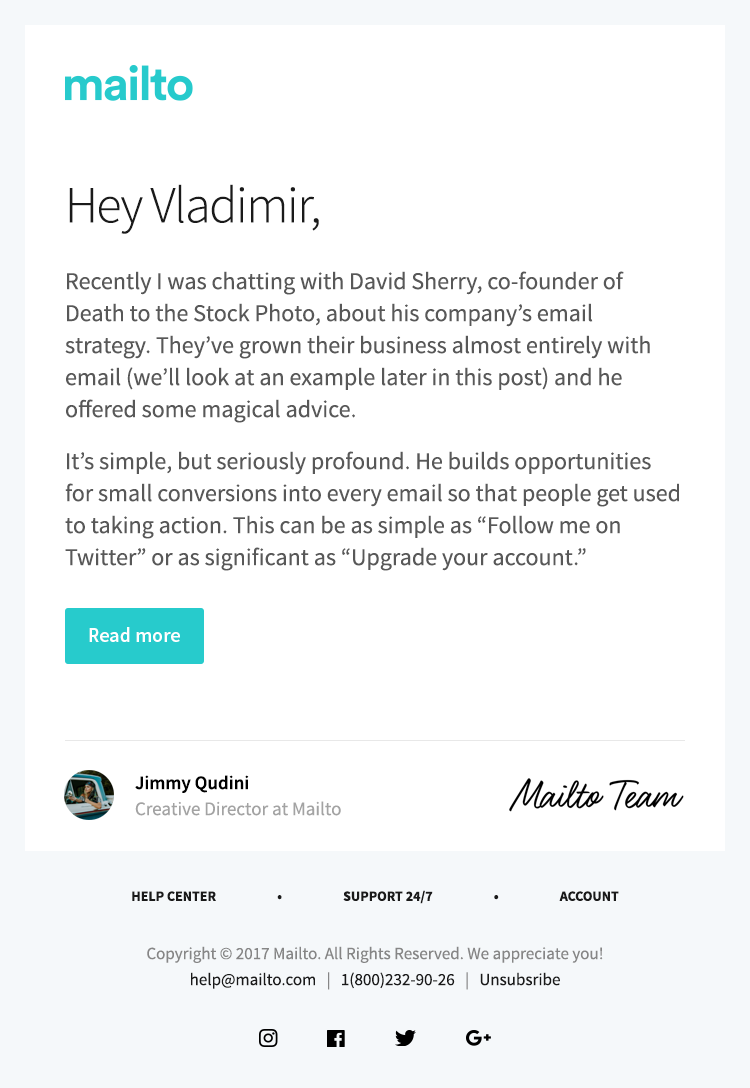
<style>
.page{position:relative;width:750px;height:1088px;background:#ffffff}
.page>*{position:absolute;margin:0}
.t1{font:52px "SourceSansPro-Light";letter-spacing:-0.03em;color:#1a1a1a}
.t2{font:24px/32px "SourceSansPro-Regular";color:#585858}
.t3{font:20px "SourceSansPro-Semibold";color:#ffffff}
.t4{font:19px "SourceSansPro-Semibold";color:#000000}
.t5{font:19px "SourceSansPro-Regular";color:#a3a3a3}
.t6{font:14px "SourceSansPro-Bold";color:#1a1a1a}
.t7{font:17px/26px "SourceSansPro-Regular";color:#868686}
.t8{font:17px/26px "SourceSansPro-Regular";color:#1a1a1a}
</style>
<div class="page">
<p class="t1" style="left:69px;top:184px;width:250px;height:50px">Hey Vladimir,</p>
<p class="t2" style="left:65px;top:271px;width:614px;height:300px">Recently I was chatting with David Sherry, co-founder of Death to the Stock Photo, about his company’s email strategy. They’ve grown their business almost entirely with email (we’ll look at an example later in this post) and he offered some magical advice.<br>It’s simple, but seriously profound. He builds opportunities for small conversions into every email so that people get used to taking action. This can be as simple as “Follow me on Twitter” or as significant as “Upgrade your account.”</p>
<p class="t3" style="left:89px;top:627px;width:91px;height:15px">Read more</p>
<p class="t4" style="left:135px;top:775px;width:114px;height:18px">Jimmy Qudini</p>
<p class="t5" style="left:135px;top:801px;width:206px;height:15px">Creative Director at Mailto</p>
<p class="t6" style="left:132px;top:890px;width:487px;height:14px">HELP CENTER                     •                     SUPPORT 24/7                     •                     ACCOUNT</p>
<p class="t7" style="left:147px;top:946px;width:456px;height:44px;text-align:center">Copyright © 2017 Mailto. All Rights Reserved. We appreciate you!<br><span class="t8">help@mailto.com </span>  |   <span class="t8">1(800)232-90-26 </span>  |   <span class="t8">Unsubsribe</span></p>
</div>
